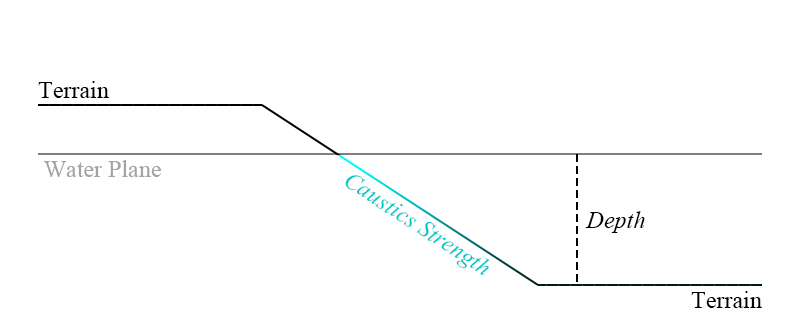
<style>
.page{position:relative;width:800px;height:333px;background:#ffffff}
.page>*{position:absolute;margin:0}
.t1{font:24px "TimesNewRomanPSMT";color:#000000}
.t2{font:24px "TimesNewRomanPSMT";color:#a3a3a3}
.t3{font:24px "TimesNewRomanPS-ItalicMT";color:#00c7c7}
.t4{font:24px "TimesNewRomanPS-ItalicMT";color:#000000}
</style>
<div class="page">
<p class="t1" style="left:38px;top:81px;width:71px;height:17px">Terrain</p>
<p class="t2" style="left:43px;top:160px;width:118px;height:17px">Water Plane</p>
<p class="t3" style="left:345px;top:175px;width:145px;height:100px;rotate:33deg">Caustics Strength</p>
<p class="t4" style="left:585px;top:211px;width:60px;height:22px">Depth</p>
<p class="t1" style="left:691px;top:291px;width:71px;height:17px">Terrain</p>
</div>
